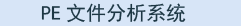
<style>
.page{position:relative;width:241px;height:26px;background:#d7e5f7}
.page>*{position:absolute;margin:0}
.t1{font:20px "SimHei";color:#1d3744}
</style>
<div class="page">
<p class="t1" style="left:41px;top:3px;width:145px;height:20px">PE文件分析系统</p>
</div>
